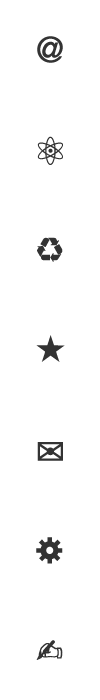
<style>
.page{position:relative;width:100px;height:700px;background:#ffffff}
.page>*{position:absolute;margin:0}
.t1{font:35px "HelveticaNeue";color:#333333;font-weight:bold}
.t2{font:40px "AppleSymbols";color:#333333;font-weight:bold}
.t3{font:35px "AppleSymbols";color:#333333;font-weight:bold}
.t4{font:50px "AppleSymbols";color:#333333}
.t5{font:46px "Menlo-Regular";color:#333333;font-weight:bold}
.t6{font:48px "AppleSymbols";color:#333333}
.t7{font:45px "Menlo-Regular";color:#333333;font-weight:bold}
</style>
<div class="page">
<p class="t1" style="left:37px;top:36px;width:26px;height:27px">@</p>
<p class="t2" style="left:37px;top:136px;width:26px;height:29px">⚛</p>
<p class="t3" style="left:37px;top:237px;width:26px;height:25px">♻</p>
<p class="t4" style="left:36px;top:335px;width:29px;height:27px">★</p>
<p class="t5" style="left:37px;top:442px;width:26px;height:19px">✉</p>
<p class="t6" style="left:36px;top:537px;width:27px;height:27px">⚙</p>
<p class="t7" style="left:36px;top:640px;width:27px;height:20px">✍</p>
</div>
